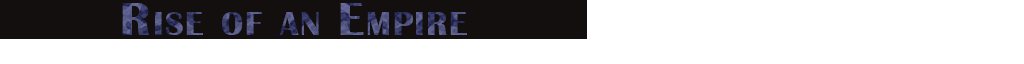
<style>
.page{position:relative;width:1024px;height:64px;background:#ffffff}
.page>*{position:absolute;margin:0}
.t1{font:48px "BritannicBold";letter-spacing:0.05em;font-variant:small-caps}
</style>
<div class="page">
<p class="t1" style="left:122px;top:3px;width:345px;height:32px">Rise of an Empire</p>
</div>
